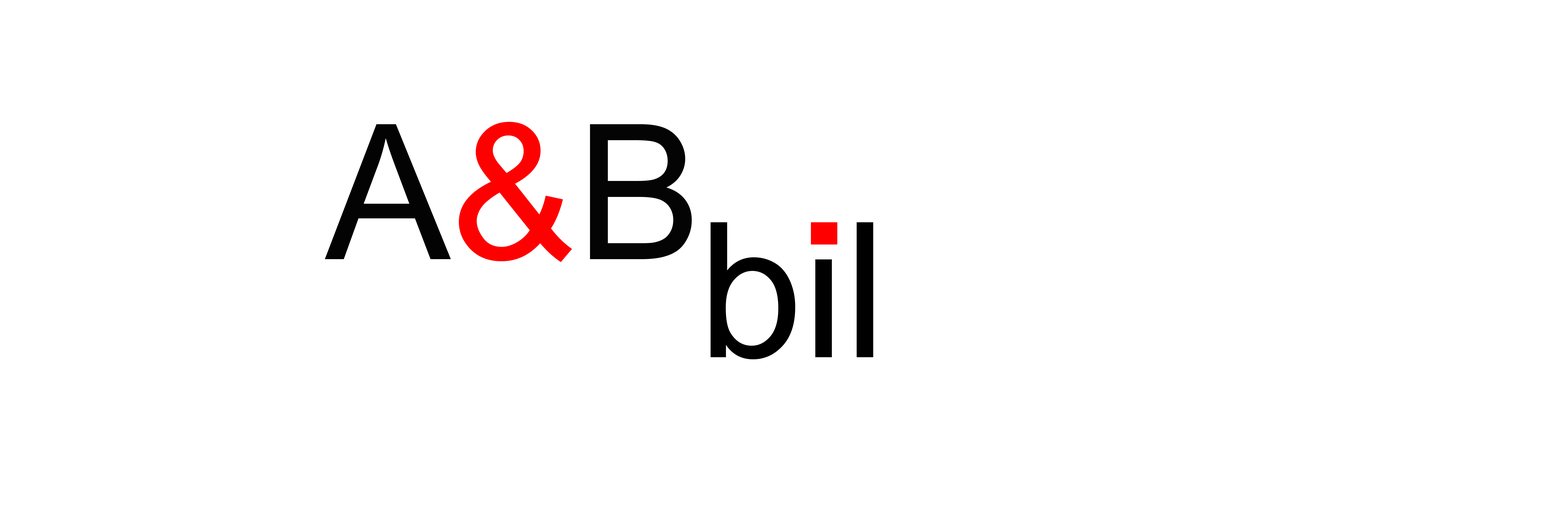
<style>
.page{position:relative;width:1568px;height:523px;background:#ffffff}
.page>*{position:absolute;margin:0}
.t1{font:188.2px "ArialMT";color:#030303}
.t2{font:188.2px "ArialMT";color:#ff0000}
.t3{font:188.2px "ArialMT";color:#040404}
.t4{font:188.2px "ArialMT";color:#000000}
</style>
<div class="page">
<p class="t1" style="left:325px;top:122px;width:367px;height:140px">A<span class="t2">&amp;</span><span class="t3">B</span></p>
<p class="t4" style="left:711px;top:222px;width:162px;height:137px">bil</p>
</div>
